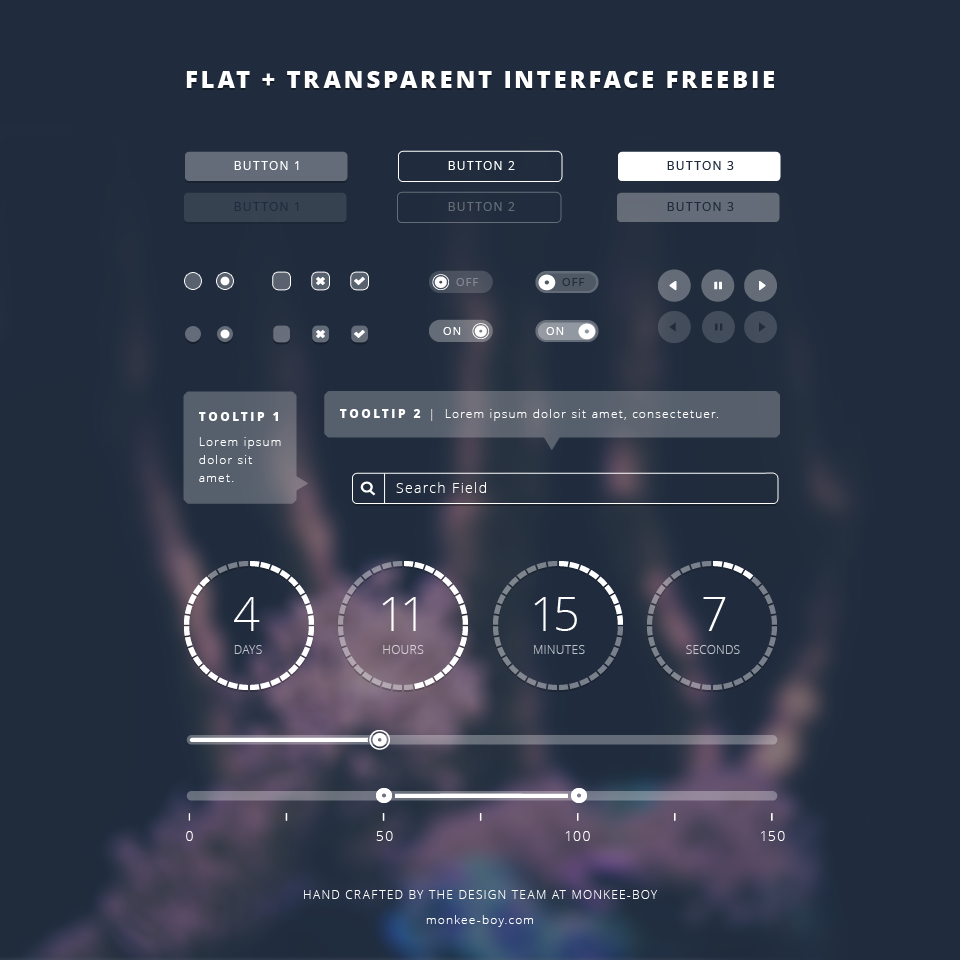
<style>
.page{position:relative;width:960px;height:960px;background:#202c3d}
.page>*{position:absolute;margin:0}
.t1{font:24.2px "OpenSans-Extrabold";letter-spacing:0.1em;color:#ffffff}
.t2{font:12px "OpenSans";letter-spacing:0.1em;color:#ffffff}
.t3{font:12px "OpenSans";letter-spacing:0.1em;color:#202c3d}
.t4{font:12px "OpenSans";letter-spacing:0.1em;color:#656d78}
.t5{font:11px "OpenSans";letter-spacing:0.1em;color:#848791}
.t6{font:11px "OpenSans";letter-spacing:0.1em;color:#202c3d}
.t7{font:11px "OpenSans";letter-spacing:0.1em;color:#ffffff}
.t8{font:12px/18px "OpenSans-Light";letter-spacing:0.1em;color:#ffffff}
.t9{font:12px/25px "OpenSans-Extrabold";letter-spacing:0.2em;color:#ffffff}
.t10{font:12px/25px "OpenSans-Light";letter-spacing:0.1em;color:#ffffff}
.t11{font:12px "OpenSans-Light";letter-spacing:0.1em;color:#ffffff}
.t12{font:12px "OpenSans-Extrabold";letter-spacing:0.2em;color:#ffffff}
.t13{font:14px "OpenSans-Light";letter-spacing:0.1em;color:#ffffff}
.t14{font:47px "OpenSans-Light";letter-spacing:0.025em;color:#ffffff}
.t15{font:12px "OpenSans-Light";letter-spacing:0.025em;color:#bec1c7;text-transform:uppercase}
.t16{font:12px "OpenSans-Light";letter-spacing:0.025em;color:#d5cfd5;text-transform:uppercase}
.t17{font:12px "OpenSans-Light";letter-spacing:0.025em;color:#bdc0c5;text-transform:uppercase}
.t18{font:12px "OpenSans-Light";letter-spacing:0.025em;color:#c1c3c8;text-transform:uppercase}
</style>
<div class="page">
<p class="t1" style="left:186px;top:71px;width:588px;height:17px">FLAT + TRANSPARENT INTERFACE FREEBIE</p>
<p class="t2" style="left:234px;top:161px;width:65px;height:9px">BUTTON 1</p>
<p class="t2" style="left:448px;top:161px;width:67px;height:9px">BUTTON 2</p>
<p class="t3" style="left:667px;top:161px;width:67px;height:9px">BUTTON 3</p>
<p class="t3" style="left:234px;top:202px;width:65px;height:9px">BUTTON 1</p>
<p class="t4" style="left:448px;top:202px;width:67px;height:9px">BUTTON 2</p>
<p class="t3" style="left:667px;top:202px;width:67px;height:9px">BUTTON 3</p>
<p class="t5" style="left:456px;top:278px;width:23px;height:8px">OFF</p>
<p class="t6" style="left:562px;top:278px;width:23px;height:8px">OFF</p>
<p class="t7" style="left:443px;top:327px;width:18px;height:8px">ON</p>
<p class="t7" style="left:546px;top:327px;width:18px;height:8px">ON</p>
<p class="t8" style="left:199px;top:412px;width:82px;height:70px"><span class="t9">TOOLTIP 1<br></span><span class="t10">Lorem ipsum </span>dolor sit amet.</p>
<p class="t11" style="left:340px;top:409px;width:378px;height:12px"><span class="t12">TOOLTIP 2 </span>|  Lorem ipsum dolor sit amet, consectetuer.</p>
<p class="t13" style="left:396px;top:482px;width:90px;height:11px">Search Field</p>
<p class="t14" style="left:234px;top:597px;width:26px;height:34px">4</p>
<p class="t14" style="left:382px;top:597px;width:34px;height:34px">11</p>
<p class="t14" style="left:534px;top:597px;width:43px;height:34px">15</p>
<p class="t14" style="left:703px;top:597px;width:23px;height:34px">7</p>
<p class="t15" style="left:234px;top:645px;width:28px;height:9px">days</p>
<p class="t16" style="left:383px;top:645px;width:41px;height:9px">hours</p>
<p class="t17" style="left:534px;top:645px;width:51px;height:9px">minutes</p>
<p class="t18" style="left:686px;top:645px;width:54px;height:9px">seconds</p>
<p class="t13" style="left:186px;top:831px;width:7px;height:10px">0</p>
<p class="t13" style="left:376px;top:831px;width:17px;height:10px">50</p>
<p class="t13" style="left:565px;top:831px;width:25px;height:10px">100</p>
<p class="t13" style="left:761px;top:831px;width:24px;height:10px">150</p>
<p class="t10" style="left:304px;top:890px;width:354px;height:37px;text-align:center">HAND CRAFTED BY THE DESIGN TEAM AT MONKEE-BOY<br>monkee-boy.com</p>
</div>
